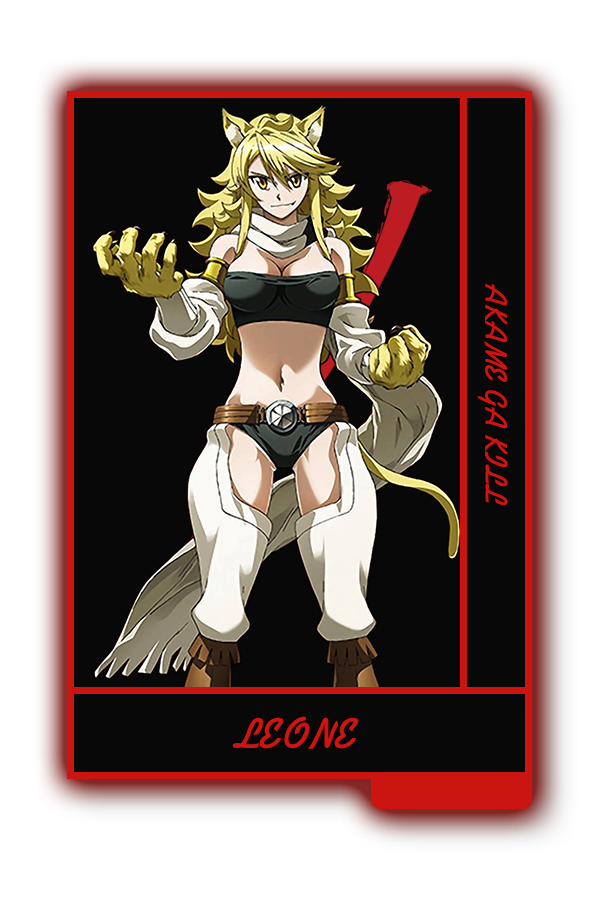
<style>
.page{position:relative;width:600px;height:900px;background:#080808}
.page>*{position:absolute;margin:0}
.t1{font:31.2px "Alako-Bold";color:#cb1511}
.t2{font:43.2px "Alako-Bold";color:#cb1511}
</style>
<div class="page">
<p class="t1" style="left:477px;top:283px;width:31px;height:223px;rotate:90deg">AKAME GA KILL</p>
<p class="t2" style="left:232px;top:716px;width:127px;height:33px">LEONE</p>
</div>
